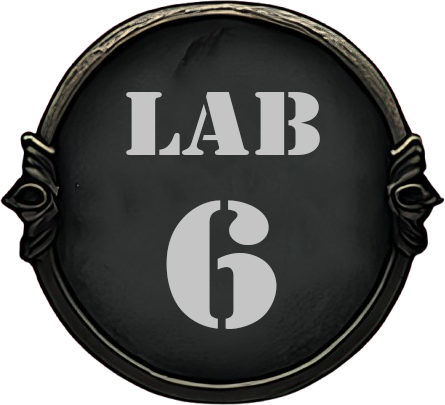
<style>
.page{position:relative;width:445px;height:405px;background:#ffffff}
.page>*{position:absolute;margin:0}
.t1{font:93.7px "Stencil";letter-spacing:0.02em;color:#c5c5c5;scale:1.15 1}
.t2{font:188.1px "Stencil";letter-spacing:0.02em;color:#c5c5c5;scale:1.15 1}
</style>
<div class="page">
<p class="t1" style="left:126px;top:92px;width:194px;height:63px">LAB</p>
<p class="t2" style="left:166px;top:200px;width:111px;height:129px">6</p>
</div>
